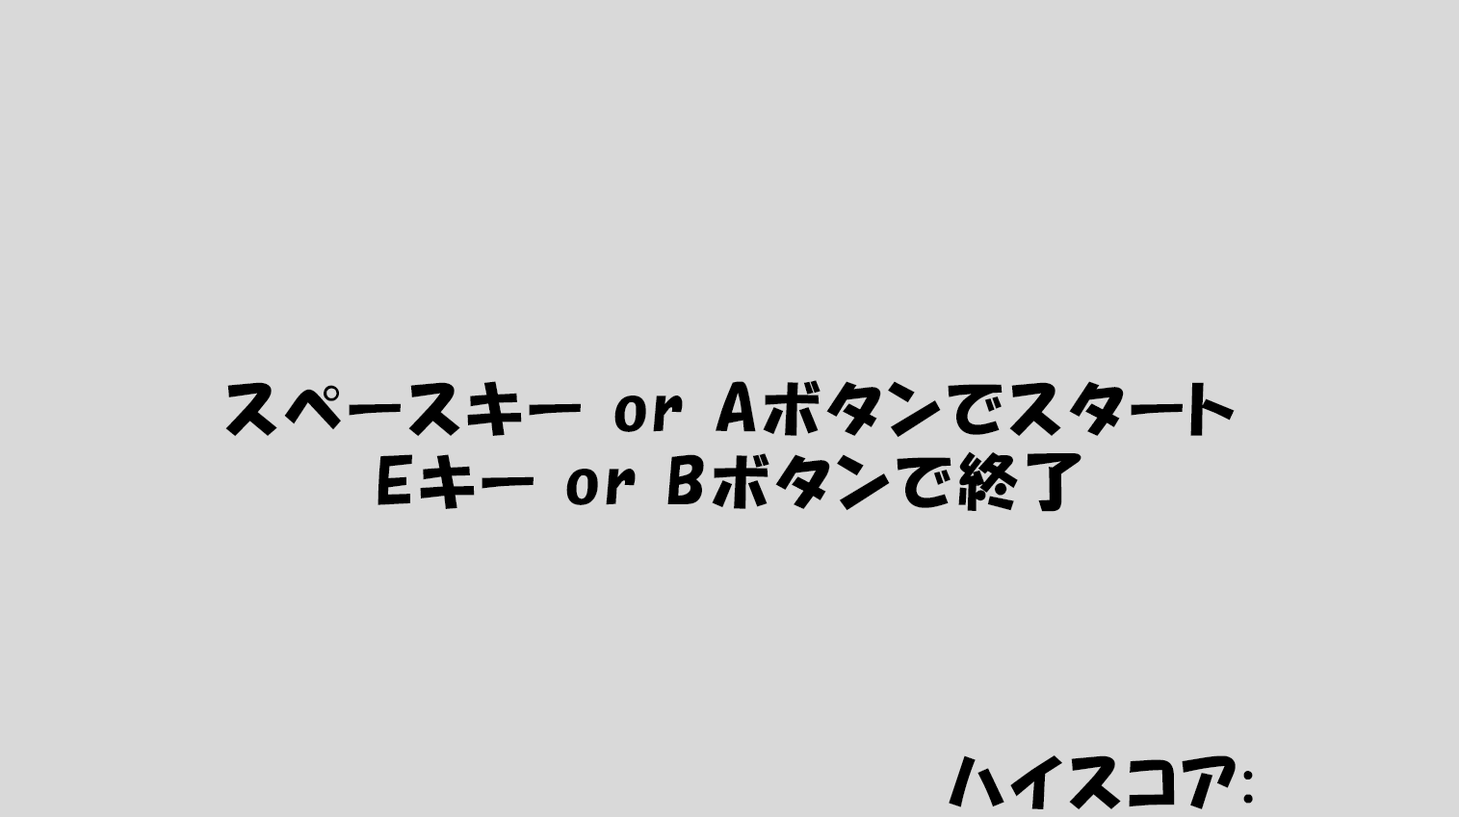
<style>
.page{position:relative;width:1459px;height:817px;background:#d9d9d9}
.page>*{position:absolute;margin:0}
.t1{font:61.6px "HGPSoeiKakupoptai";letter-spacing:0.08em;color:#000000}
</style>
<div class="page">
<p class="t1" style="left:225px;top:380px;width:1009px;height:58px">スペースキー or Aボタンでスタート</p>
<p class="t1" style="left:377px;top:452px;width:704px;height:60px">Eキー or Bボタンで終了</p>
<p class="t1" style="left:948px;top:756px;width:305px;height:55px">ハイスコア:</p>
</div>
